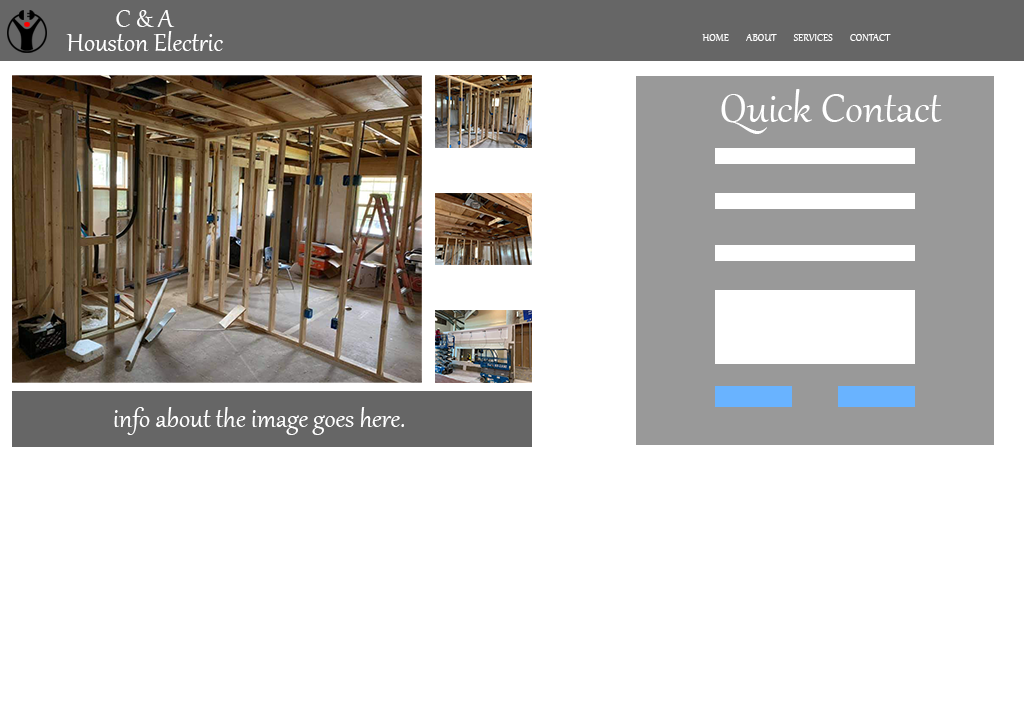
<style>
.page{position:relative;width:1024px;height:728px;background:#ffffff}
.page>*{position:absolute;margin:0}
.t1{font:31px "Gabriola";color:#ffffff}
.t2{font:12.4px "Gabriola";color:#ffffff}
.t3{font:50px "Gabriola";color:#ffffff}
</style>
<div class="page">
<p class="t1" style="left:116px;top:10px;width:59px;height:17px">C &amp; A</p>
<p class="t1" style="left:66px;top:31px;width:157px;height:20px">Houston Electric</p>
<p class="t2" style="left:702px;top:34px;width:189px;height:7px">HOME        ABOUT        SERVICES        CONTACT</p>
<p class="t3" style="left:721px;top:89px;width:221px;height:45px">Quick Contact</p>
<p class="t1" style="left:114px;top:407px;width:290px;height:28px">info about the image goes here.</p>
</div>
